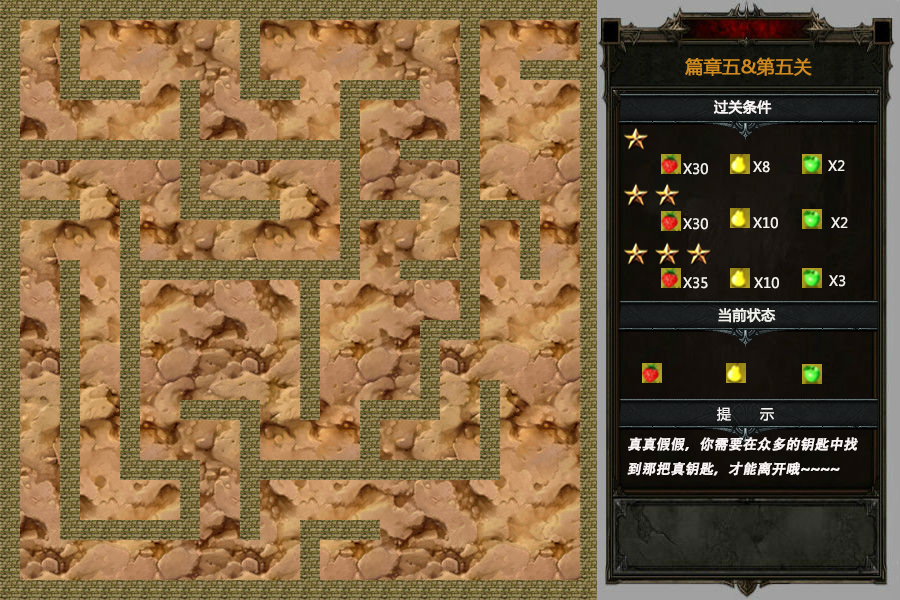
<style>
.page{position:relative;width:900px;height:600px}
.page>*{position:absolute;margin:0}
.t1{font:18px "MicrosoftYaHei";color:#cf8b20;font-weight:bold}
.t2{font:14px "MicrosoftYaHei";color:#f9f3f3;font-weight:bold}
.t3{font:14px "MicrosoftYaHei";color:#f1f0e9}
.t4{font:14px "MicrosoftYaHei";color:#f1f0e9;font-weight:bold}
.t5{font:14px "MicrosoftYaHei";color:#f9f3f3}
.t6{font:14px "AdobeHeitiStd-Regular";color:#f9f3f3;font-weight:bold;font-style:italic}
</style>
<div class="page">
<p class="t1" style="left:685px;top:57px;width:127px;height:19px">篇章五&amp;第五关</p>
<p class="t2" style="left:714px;top:100px;width:58px;height:15px">过关条件</p>
<p class="t3" style="left:753px;top:161px;width:17px;height:12px">X8</p>
<p class="t3" style="left:828px;top:160px;width:17px;height:11px">X2</p>
<p class="t3" style="left:683px;top:163px;width:25px;height:12px">X30</p>
<p class="t3" style="left:683px;top:218px;width:25px;height:12px">X30</p>
<p class="t3" style="left:753px;top:217px;width:25px;height:12px">X10</p>
<p class="t3" style="left:831px;top:217px;width:17px;height:11px">X2</p>
<p class="t3" style="left:683px;top:277px;width:25px;height:12px">X35</p>
<p class="t3" style="left:754px;top:277px;width:25px;height:12px">X10</p>
<p class="t3" style="left:829px;top:275px;width:17px;height:12px">X3</p>
<p class="t4" style="left:718px;top:308px;width:58px;height:15px">当前状态</p>
<p class="t5" style="left:717px;top:407px;width:57px;height:14px">提       示</p>
<p class="t6" style="left:627px;top:437px;width:231px;height:39px">真真假假，你需要在众多的钥匙中找到那把真钥匙，才能离开哦~~~~</p>
</div>
